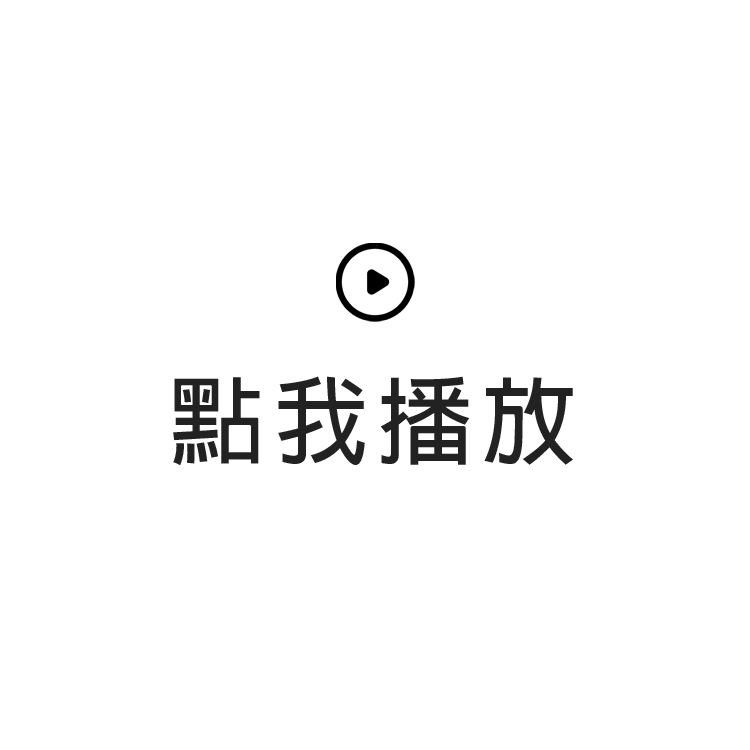
<style>
.page{position:relative;width:750px;height:750px;background:#ffffff}
.page>*{position:absolute;margin:0}
.t1{font:94.6px "AdobeFanHeitiStd-Bold";letter-spacing:0.1em;color:#222222}
</style>
<div class="page">
<p class="t1" style="left:173px;top:376px;width:400px;height:90px">點我播放</p>
</div>
